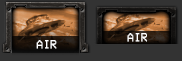
<style>
.page{position:relative;width:182px;height:61px;background:#333333}
.page>*{position:absolute;margin:0}
.t1{font:12.2px "VCROSDMono";color:#ffffff;scale:0.97 1}
</style>
<div class="page">
<p class="t1" style="left:36px;top:40px;width:21px;height:9px">AIR</p>
<p class="t1" style="left:127px;top:33px;width:20px;height:9px">AIR</p>
</div>
